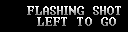
<style>
.page{position:relative;width:128px;height:32px;background:#000000}
.page>*{position:absolute;margin:0}
.t1{font:12px "Terminal"}
</style>
<div class="page">
<p class="t1" style="left:37px;top:17px;width:79px;height:9px">LEFT TO GO</p>
</div>
